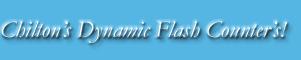
<style>
.page{position:relative;width:301px;height:60px;background:#56b6e3}
.page>*{position:absolute;margin:0}
.t1{font:24px "Garamond-Italic";color:#ffffff}
</style>
<div class="page">
<p class="t1" style="left:1px;top:21px;width:286px;height:22px">Chilton’s Dynamic Flash Counter’s!</p>
</div>
